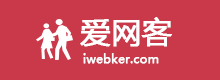
<style>
.page{position:relative;width:220px;height:80px;background:#c9394a}
.page>*{position:absolute;margin:0}
.t1{font:30px "MicrosoftYaHei";color:#ffffff;font-weight:bold}
.t2{font:12px "MicrosoftYaHei";color:#ffffff;font-weight:bold}
</style>
<div class="page">
<p class="t1" style="left:80px;top:17px;width:92px;height:30px">爱网客</p>
<p class="t2" style="left:83px;top:53px;width:76px;height:11px">iwebker.com</p>
</div>
